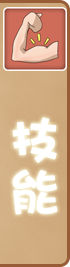
<style>
.page{position:relative;width:70px;height:267px}
.page>*{position:absolute;margin:0}
.t1{font:50px/5px "DFHaiBao-W9-WINP-BF";letter-spacing:0.05em;color:#ffffff}
</style>
<div class="page">
<p class="t1" style="left:12px;top:117px;width:46px;height:98px;text-align:center">技能</p>
</div>
